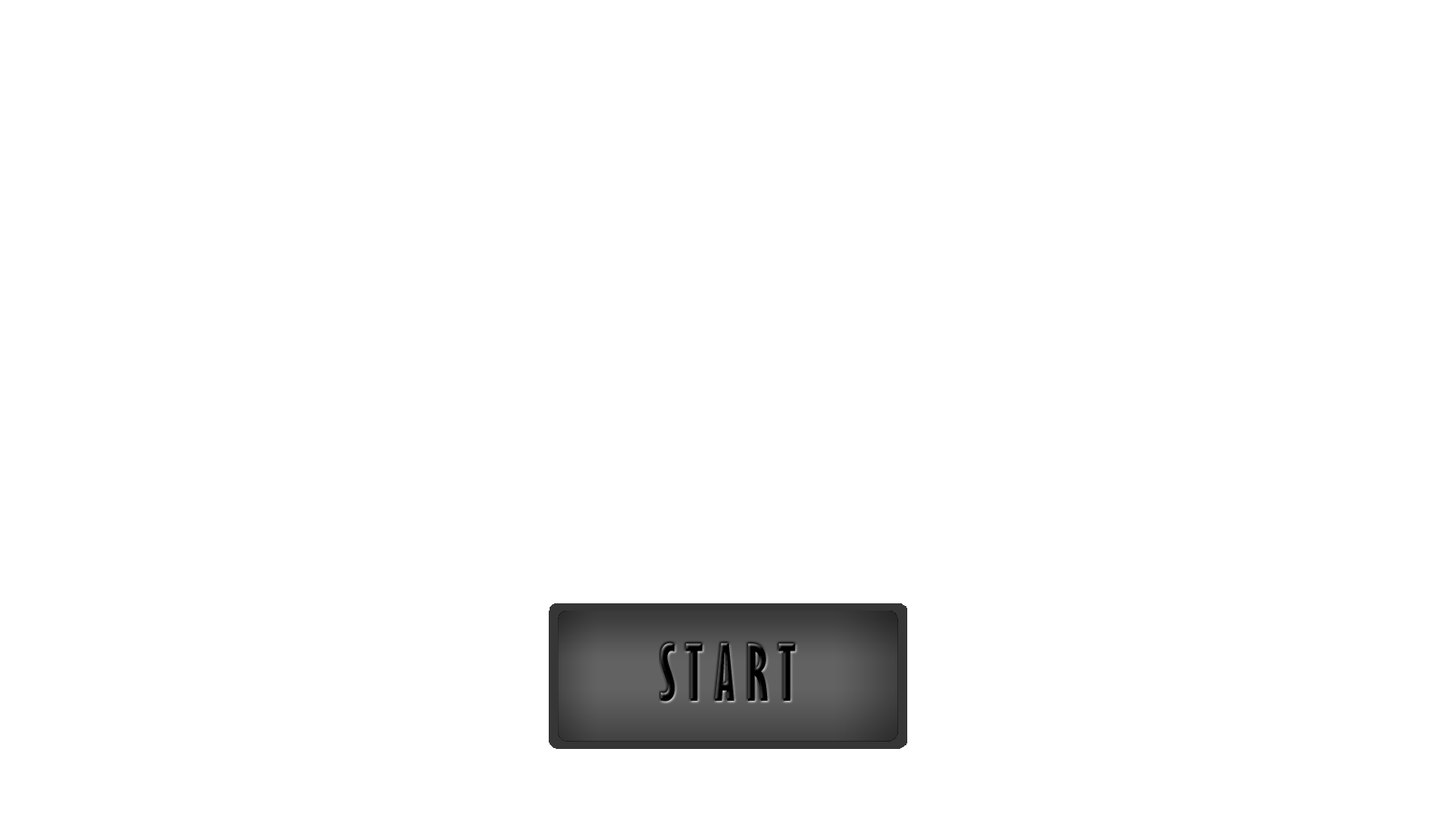
<style>
.page{position:relative;width:1456px;height:819px;background:#ffffff}
.page>*{position:absolute;margin:0}
.t1{font:71.6px "GillSansMT-ExtraCondensedBold";color:#000000;scale:0.91 1}
</style>
<div class="page">
<p class="t1" style="left:661px;top:642px;width:134px;height:60px">S T A R T</p>
</div>
